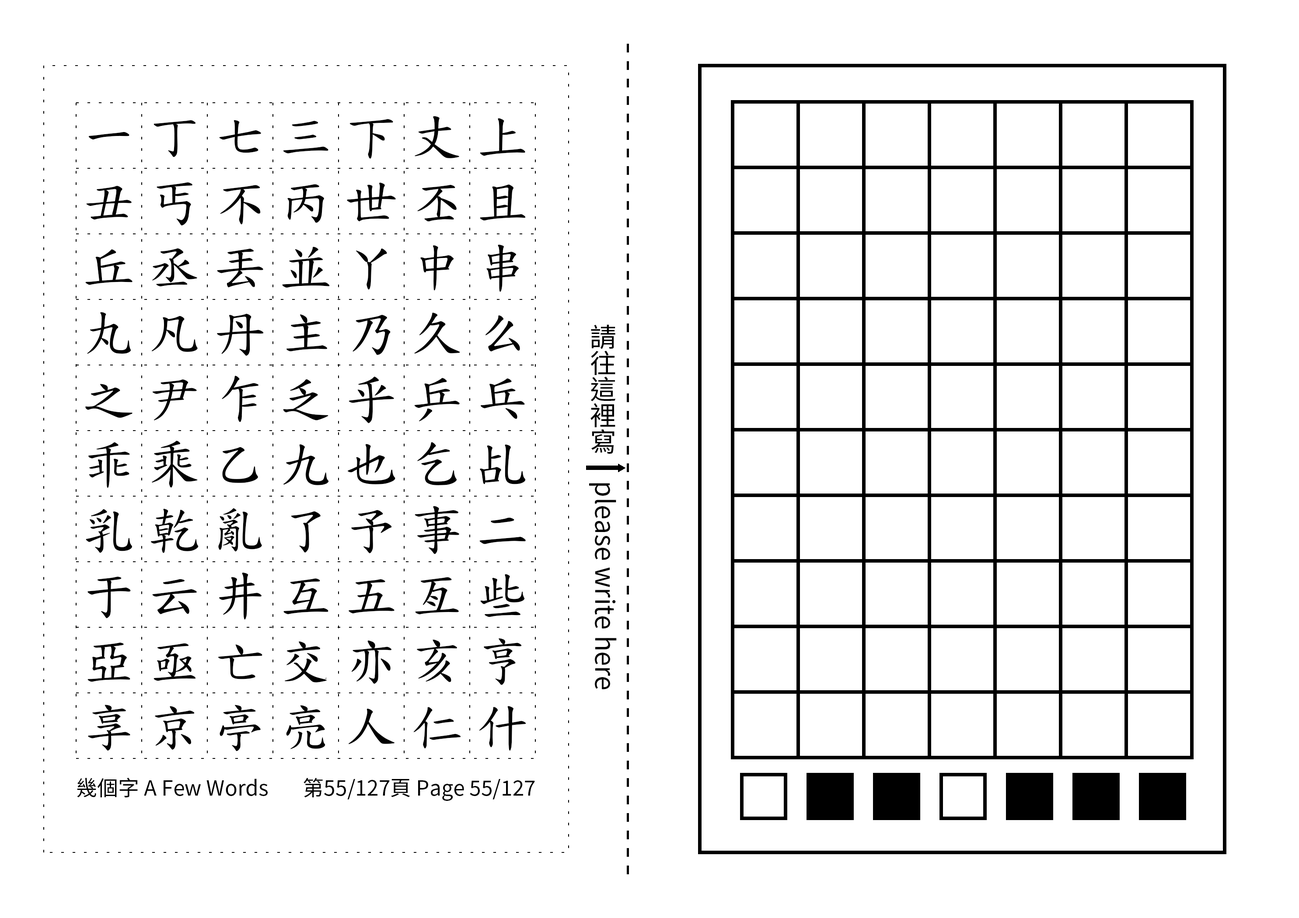
<style>
.page{position:relative;width:1299px;height:918px;background:#ffffff}
.page>*{position:absolute;margin:0}
.t1{font:52.5px/65.6px "TW-Kai-98_1";letter-spacing:0.25em;color:#000000}
.t2{font:26.2px "SourceHanSansTC-Regular";color:#000000}
.t3{font:21px "SourceHanSansTC-Regular";color:#000000}
</style>
<div class="page">
<p class="t1" style="left:85px;top:116px;width:441px;height:636px;text-align:center">一丁七三下丈上丑丐不丙世丕且丘丞丟並丫中串丸凡丹主乃久么之尹乍乏乎乒乓乖乘乙九也乞乩乳乾亂了予事二于云井互五亙些亞亟亡交亦亥亨享京亭亮人仁什</p>
<p class="t2" style="left:589px;top:324px;width:28px;height:366px;text-align:center">請往這裡寫　please write here</p>
<p class="t3" style="left:77px;top:778px;width:191px;height:20px">幾個字 A Few Words</p>
<p class="t3" style="left:303px;top:778px;width:232px;height:23px">第55/127頁 Page 55/127</p>
</div>
